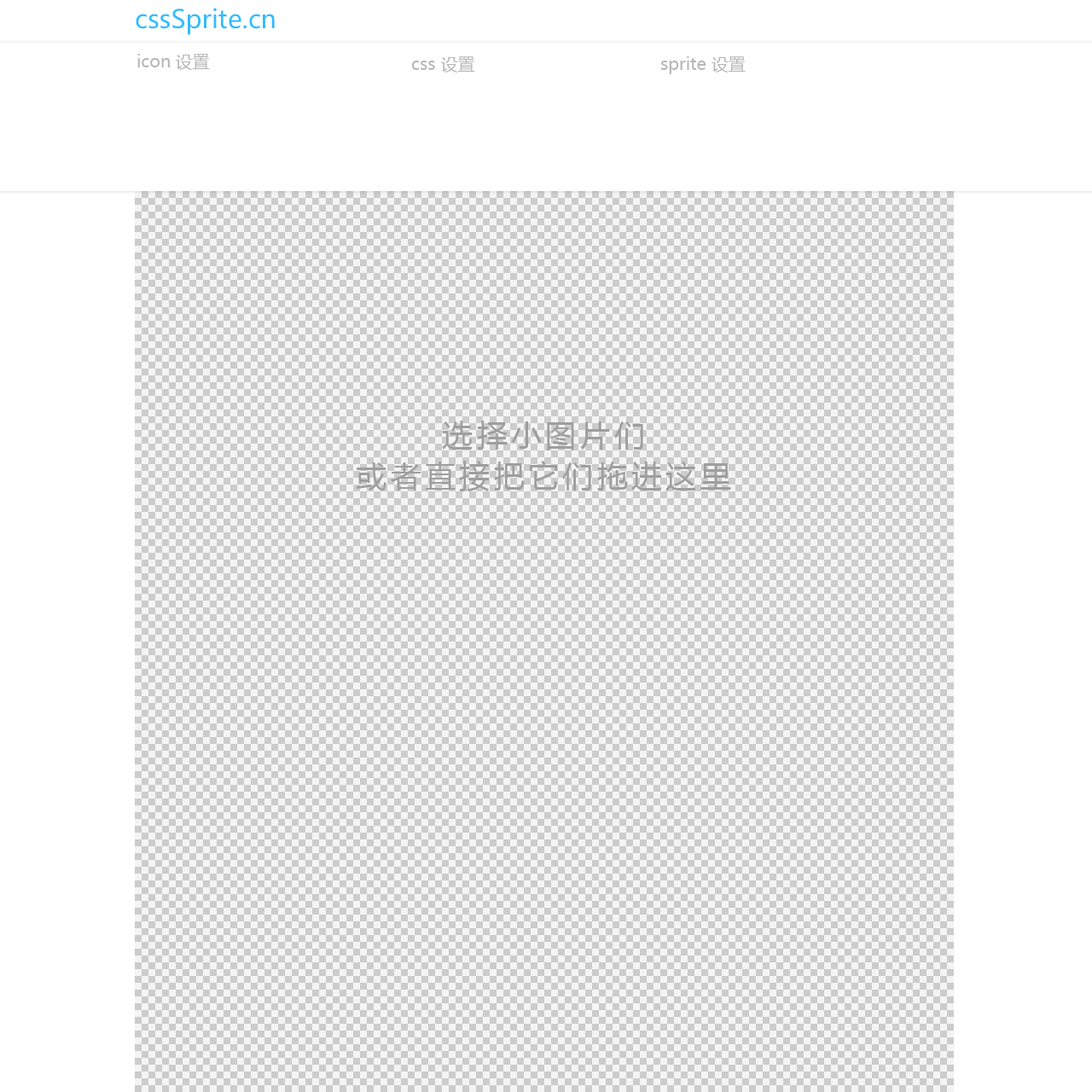
<style>
.page{position:relative;width:1092px;height:1092px;background:#ffffff}
.page>*{position:absolute;margin:0}
.t1{font:25.3px "MicrosoftYaHei";color:#30bdff}
.t2{font:17.1px "MicrosoftYaHei";color:#b6b6b6}
.t3{font:30.7px/40.9px "MicrosoftYaHei";letter-spacing:0.12em;color:#9e9e9e}
</style>
<div class="page">
<p class="t1" style="left:136px;top:8px;width:139px;height:27px">cssSprite.cn</p>
<p class="t2" style="left:137px;top:54px;width:73px;height:16px">icon设置</p>
<p class="t2" style="left:411px;top:56px;width:64px;height:17px">css 设置</p>
<p class="t2" style="left:661px;top:56px;width:85px;height:18px">sprite 设置</p>
<p class="t3" style="left:356px;top:421px;width:375px;height:70px;text-align:center">选择小图片们<br>或者直接把它们拖进这里</p>
</div>
